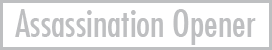
<style>
.page{position:relative;width:272px;height:50px;background:#ffffff}
.page>*{position:absolute;margin:0}
.t1{font:37.3px "FuturaCondensed";color:#bebfc1}
</style>
<div class="page">
<p class="t1" style="left:15px;top:9px;width:241px;height:36px">Assassination Opener</p>
</div>
